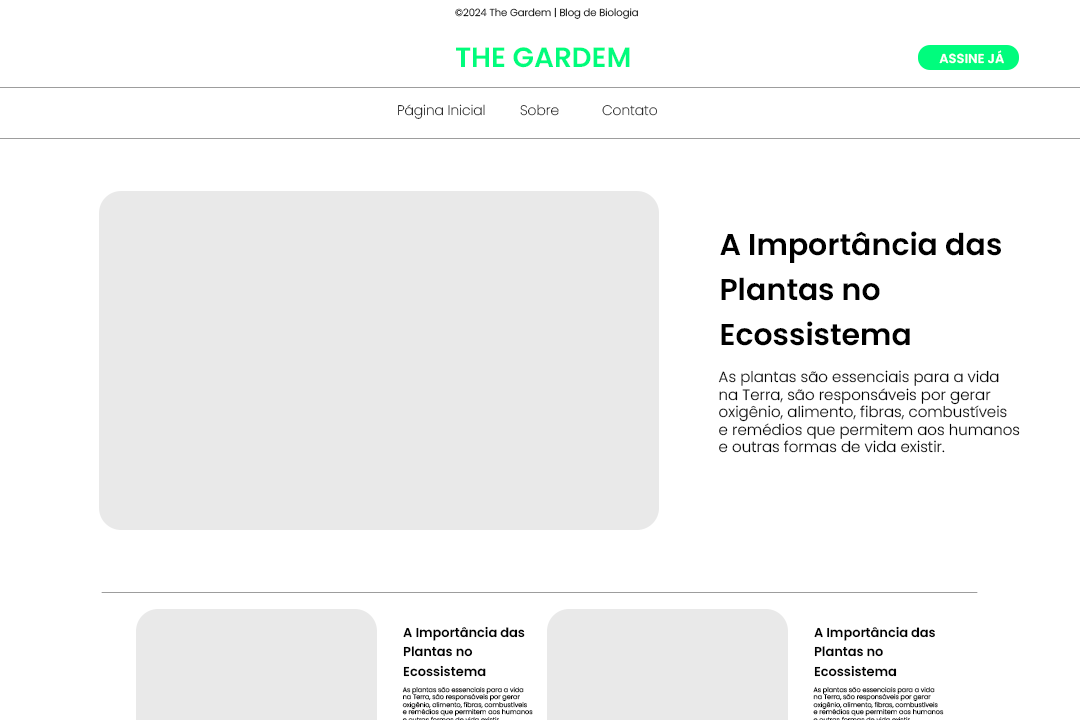
<style>
.page{position:relative;width:1080px;height:720px;background:#ffffff}
.page>*{position:absolute;margin:0}
.t1{font:10px "Poppins-Light";color:#000000}
.t2{font:27.8px "Poppins-SemiBold";color:#00fc7d}
.t3{font:13px "Poppins-SemiBold";color:#ffffff}
.t4{font:13.8px "Poppins-ExtraLight"}
.t5{font:30px/45px "Poppins-SemiBold";color:#000000}
.t6{font:15px/17.5px "Poppins-Light";color:#000000}
.t7{font:12.9px/19.4px "Poppins-SemiBold";color:#000000}
</style>
<div class="page">
<p class="t1" style="left:455px;top:7px;width:183px;height:12px">©2024 The Gardem | Blog de Biologia</p>
<p class="t2" style="left:456px;top:47px;width:174px;height:21px">THE GARDEM</p>
<p class="t3" style="left:939px;top:50px;width:65px;height:14px">ASSINE JÁ</p>
<p class="t4" style="left:398px;top:104px;width:87px;height:15px">Página Inicial</p>
<p class="t4" style="left:520px;top:104px;width:39px;height:12px">Sobre</p>
<p class="t4" style="left:602px;top:105px;width:55px;height:11px">Contato</p>
<p class="t5" style="left:720px;top:231px;width:281px;height:115px">A Importância das <br>Plantas no <br>Ecossistema</p>
<p class="t6" style="left:718px;top:370px;width:302px;height:83px">As plantas são essenciais para a vida <br>na Terra, são responsáveis por gerar <br>oxigênio, alimento, fibras, combustíveis <br>e remédios que permitem aos humanos <br>e outras formas de vida existir.</p>
<p class="t7" style="left:403px;top:626px;width:122px;height:51px">A Importância das <br>Plantas no <br>Ecossistema</p>
<p class="t7" style="left:814px;top:626px;width:121px;height:51px">A Importância das <br>Plantas no <br>Ecossistema</p>
</div>
